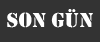
<style>
.page{position:relative;width:100px;height:42px;background:#333333}
.page>*{position:absolute;margin:0}
.t1{font:21.3px "Stencil";color:#ffffff}
</style>
<div class="page">
<p class="t1" style="left:7px;top:9px;width:86px;height:19px">Son Gün</p>
</div>
